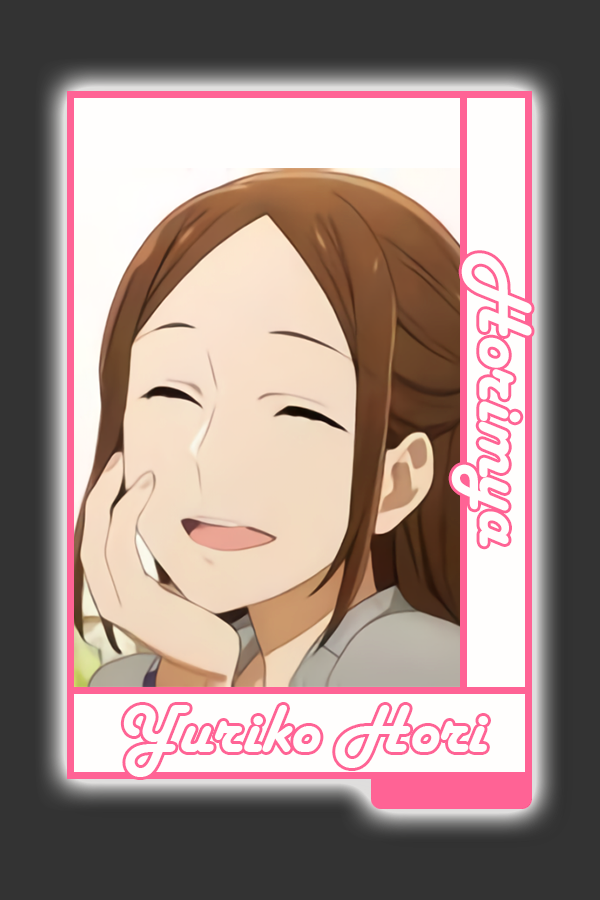
<style>
.page{position:relative;width:600px;height:900px;background:#333333}
.page>*{position:absolute;margin:0}
.t1{font:77.5px "HarlowSolid";color:#fffefd}
.t2{font:70.1px "HarlowSolid";color:#fffefd}
</style>
<div class="page">
<p class="t1" style="left:451px;top:253px;width:81px;height:294px;rotate:90deg">Horimya</p>
<p class="t2" style="left:123px;top:705px;width:365px;height:72px">Yuriko Hori</p>
</div>
